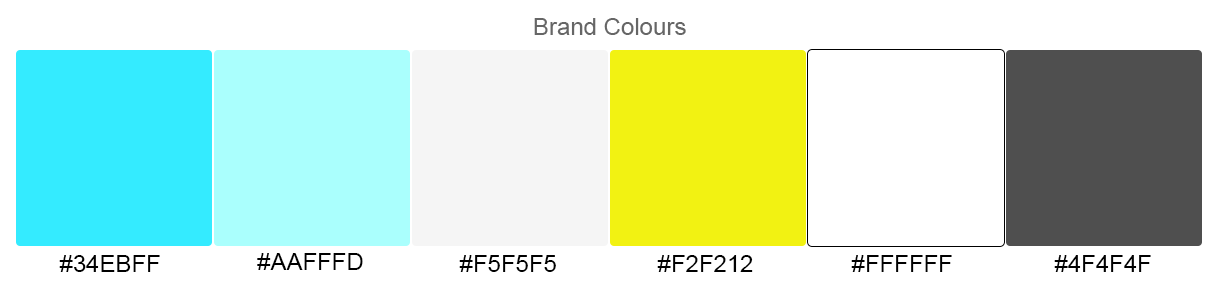
<style>
.page{position:relative;width:1232px;height:300px;background:#ffffff}
.page>*{position:absolute;margin:0}
.t1{font:24px "ArialMT";color:#666666}
.t2{font:24px "ArialMT";color:#000000}
</style>
<div class="page">
<p class="t1" style="left:534px;top:18px;width:152px;height:17px">Brand Colours</p>
<p class="t2" style="left:59px;top:255px;width:101px;height:17px">#34EBFFF</p>
<p class="t2" style="left:257px;top:253px;width:106px;height:17px">#AAFFFD</p>
<p class="t2" style="left:459px;top:255px;width:97px;height:17px">#F5F5F5</p>
<p class="t2" style="left:657px;top:255px;width:96px;height:17px">#F2F212</p>
<p class="t2" style="left:851px;top:255px;width:101px;height:17px">#FFFFFF</p>
<p class="t2" style="left:1054px;top:255px;width:97px;height:17px">#4F4F4F</p>
</div>
